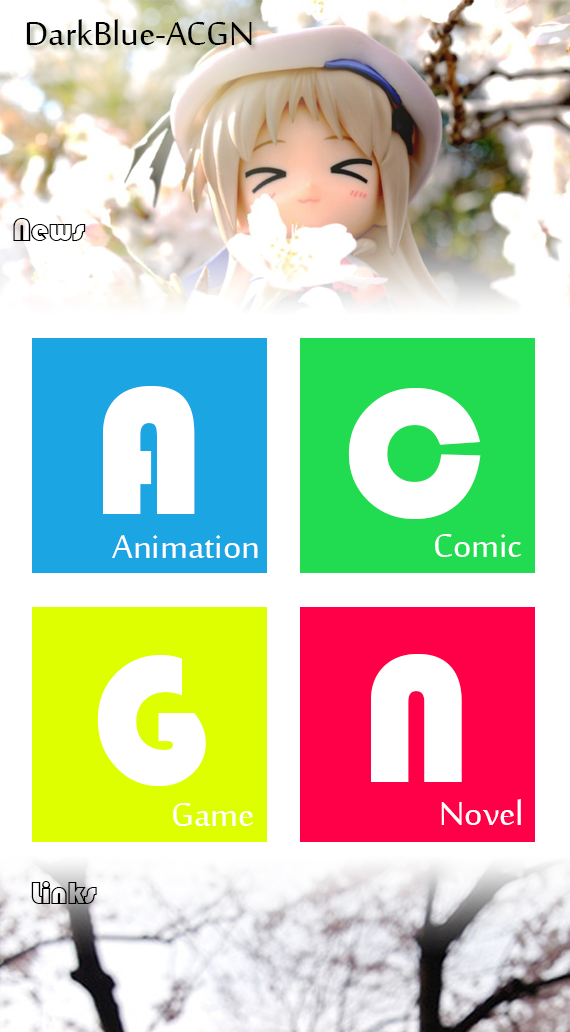
<style>
.page{position:relative;width:570px;height:1032px;background:#ffffff}
.page>*{position:absolute;margin:0}
.t1{font:45.5px "SakkalMajalla";color:#000000}
.t2{font:31.5px "STCaiyun";color:#000000}
.t3{font:188.5px "Bauhaus93";color:#ffffff}
.t4{font:45.5px "SakkalMajalla";color:#ffffff}
</style>
<div class="page">
<p class="t1" style="left:26px;top:19px;width:226px;height:26px">DarkBlue-ACGN</p>
<p class="t2" style="left:13px;top:218px;width:73px;height:23px">News</p>
<p class="t3" style="left:103px;top:386px;width:92px;height:128px">A</p>
<p class="t3" style="left:348px;top:388px;width:133px;height:131px">C</p>
<p class="t4" style="left:435px;top:534px;width:86px;height:23px">Comic</p>
<p class="t4" style="left:112px;top:535px;width:146px;height:23px">Animation</p>
<p class="t3" style="left:371px;top:654px;width:91px;height:128px">N</p>
<p class="t3" style="left:97px;top:655px;width:109px;height:131px">G</p>
<p class="t4" style="left:173px;top:803px;width:80px;height:23px">Game</p>
<p class="t4" style="left:441px;top:799px;width:80px;height:26px">Novel</p>
<p class="t2" style="left:31px;top:881px;width:66px;height:23px">Links</p>
</div>
